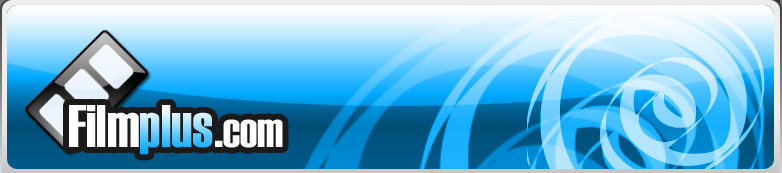
<style>
.page{position:relative;width:782px;height:173px}
.page>*{position:absolute;margin:0}
.t1{font:60px "Haettenschweiler";color:#ffffff}
.t2{font:60px "Haettenschweiler";color:#00a8ff}
.t3{font:48px "Haettenschweiler";color:#ffffff}
</style>
<div class="page">
<p class="t1" style="left:69px;top:105px;width:214px;height:50px">Film<span class="t2">plus</span>.<span class="t3">com</span></p>
</div>
